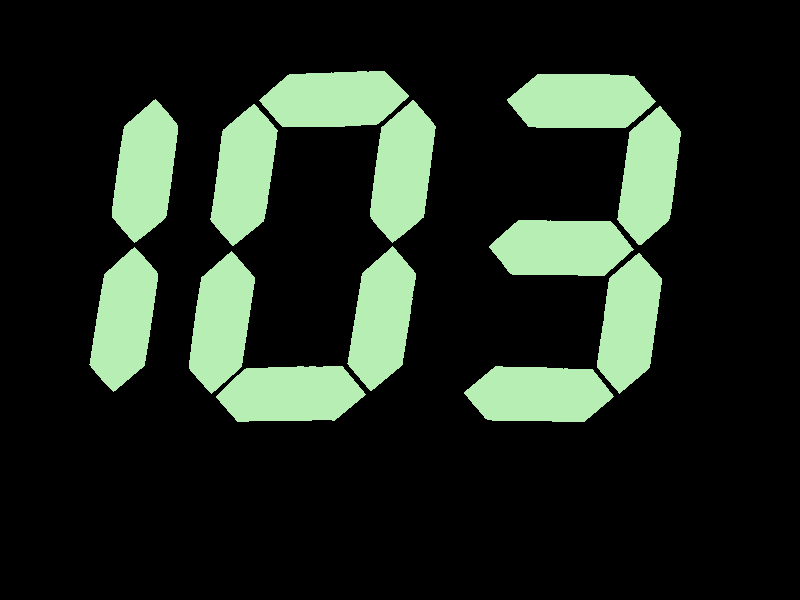
<style>
.page{position:relative;width:800px;height:600px;background:#000000}
.page>*{position:absolute;margin:0}
.t1{font:300px "103ledt-shirt";color:#b6eeb3}
.t2{font:300px "103ledt-shirt";color:#b6eeb3;font-weight:bold}
</style>
<div class="page">
<p class="t1" style="left:89px;top:71px;width:592px;height:351px"><span class="t2">           </span>103</p>
</div>
